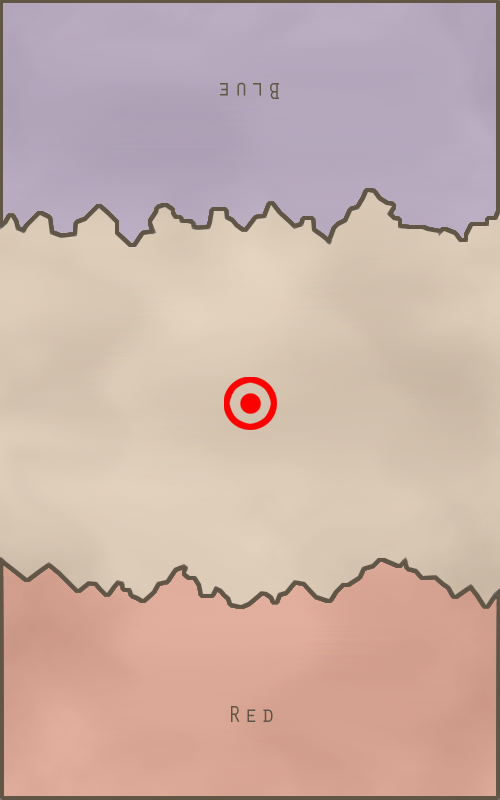
<style>
.page{position:relative;width:500px;height:800px}
.page>*{position:absolute;margin:0}
.t1{font:24px "OratorStd";letter-spacing:0.1em;color:#615646}
</style>
<div class="page">
<p class="t1" style="left:220px;top:82px;width:59px;height:17px;rotate:180deg">Blue</p>
<p class="t1" style="left:231px;top:706px;width:42px;height:17px">Red</p>
</div>
